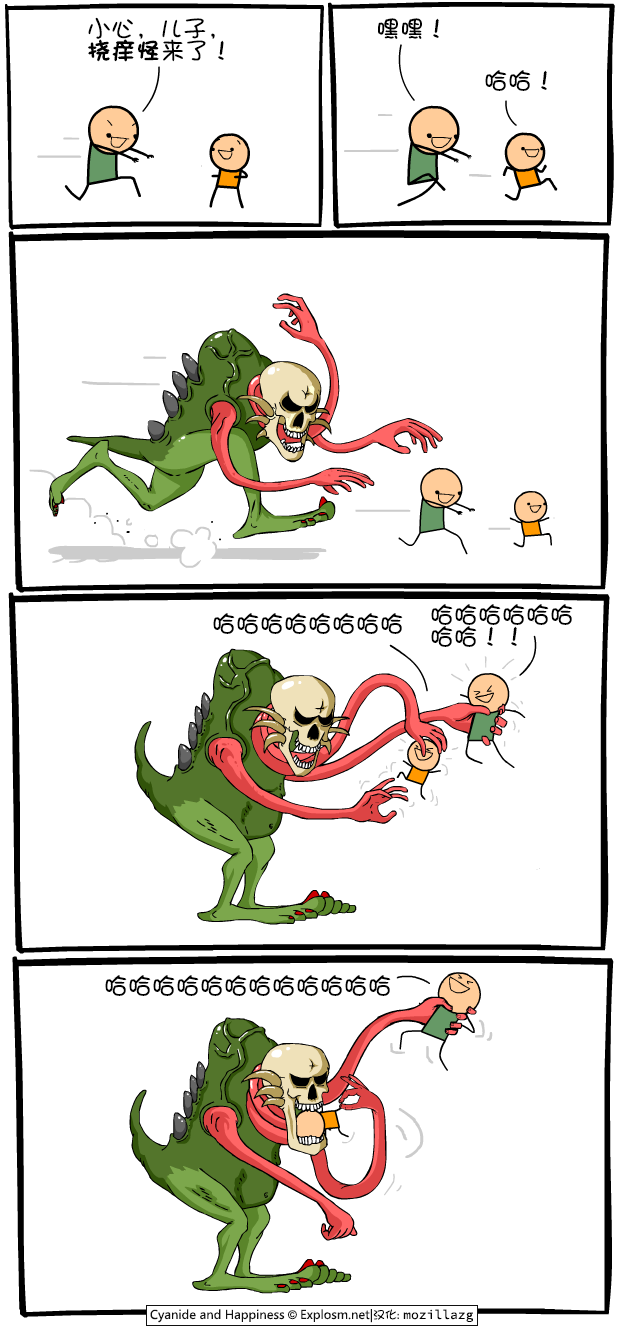
<style>
.page{position:relative;width:630px;height:1340px;background:#ffffff}
.page>*{position:absolute;margin:0}
.t1{font:24px/22px "DFShaoNvW5";color:#000000}
.t2{font:24px/22px "DFShaoNvW5";color:#000000;font-weight:bold}
.t3{font:24px "DFShaoNvW5";color:#000000}
</style>
<div class="page">
<p class="t1" style="left:88px;top:17px;width:136px;height:45px">小心，儿子，<br><span class="t2">挠痒怪</span>来了！</p>
<p class="t3" style="left:378px;top:18px;width:61px;height:21px">嘿嘿！</p>
<p class="t3" style="left:485px;top:70px;width:62px;height:21px">哈哈！</p>
<p class="t1" style="left:431px;top:604px;width:142px;height:43px">哈哈哈哈哈哈<br>哈哈！！</p>
<p class="t3" style="left:213px;top:613px;width:190px;height:21px">哈哈哈哈哈哈哈哈</p>
<p class="t3" style="left:105px;top:975px;width:286px;height:21px">哈哈哈哈哈哈哈哈哈哈哈哈</p>
</div>
